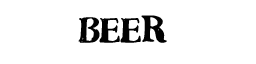
<style>
.page{position:relative;width:256px;height:64px;background:#ffffff}
.page>*{position:absolute;margin:0}
.t1{font:36px "CountryGold";color:#020202}
</style>
<div class="page">
<p class="t1" style="left:78px;top:15px;width:89px;height:28px">BEER</p>
</div>
